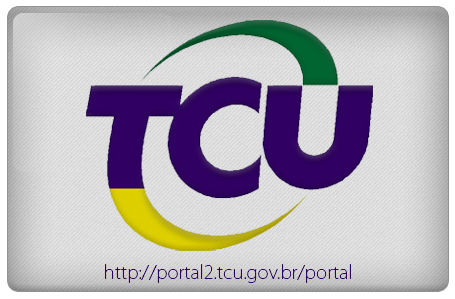
<style>
.page{position:relative;width:455px;height:299px}
.page>*{position:absolute;margin:0}
.t1{font:18.1px "KozGoPro-ExtraLight";color:#2e005f}
</style>
<div class="page">
<p class="t1" style="left:105px;top:264px;width:246px;height:19px">http://portal2.tcu.gov.br/portal</p>
</div>
